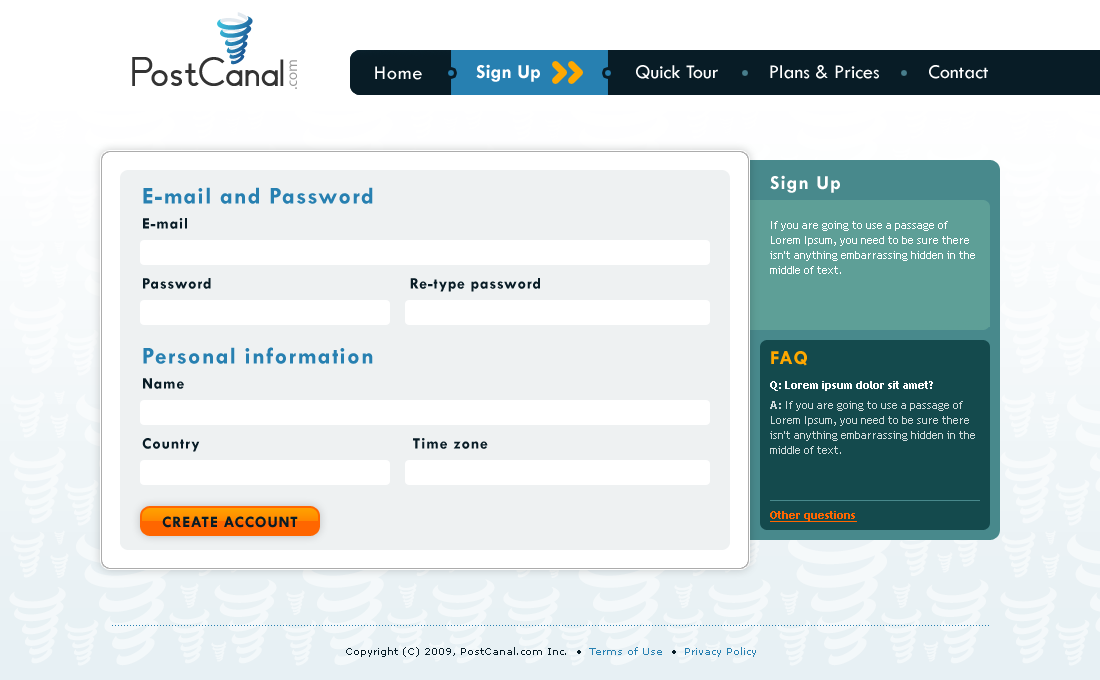
<style>
.page{position:relative;width:1100px;height:680px;background:#ffffff}
.page>*{position:absolute;margin:0}
.t1{font:20px "TwCenMT-Bold";color:#ffffff}
.t2{font:20px "TwCenMT-Regular";color:#ffffff}
.t3{font:20px "TwCenMT-Regular";letter-spacing:0.05em;color:#ffffff}
.t4{font:20px "TwCenMT-Bold";letter-spacing:0.05em;color:#ffffff}
.t5{font:24px/20px "TwCenMT-Bold";letter-spacing:0.05em;color:#2780b1}
.t6{font:16px/20px "TwCenMT-Bold";letter-spacing:0.05em;color:#081c26}
.t7{font:11px/15px "TrebuchetMS";color:#ffffff}
.t8{font:20px "TwCenMT-Bold";letter-spacing:0.05em;color:#ffa800}
.t9{font:11px "TrebuchetMS-Bold";color:#ffffff}
.t10{font:11px/15px "TrebuchetMS";color:#d0dbdb}
.t11{font:11px/15px "TrebuchetMS-Bold";color:#d0dbdb}
.t12{font:16px "TwCenMT-Bold";letter-spacing:0.05em;color:#081c26;text-transform:uppercase}
.t13{font:11px "TrebuchetMS-Bold";color:#ff6600;text-decoration:underline}
.t14{font:10px "Verdana";color:#081c26}
.t15{font:10px "Verdana";color:#2780b1}
</style>
<div class="page">
<p class="t1" style="left:476px;top:64px;width:64px;height:18px">Sign Up</p>
<p class="t2" style="left:636px;top:65px;width:82px;height:14px">Quick Tour</p>
<p class="t2" style="left:770px;top:65px;width:109px;height:14px">Plans &amp; Prices</p>
<p class="t2" style="left:929px;top:65px;width:59px;height:14px">Contact</p>
<p class="t3" style="left:375px;top:66px;width:47px;height:14px">Home</p>
<p class="t4" style="left:770px;top:175px;width:70px;height:18px">Sign Up</p>
<p class="t5" style="left:143px;top:187px;width:230px;height:177px">E-mail and Password<br><br><br><br><br><br><br><br>Personal information</p>
<p class="t6" style="left:142px;top:218px;width:398px;height:234px">E-mail<br><br><br>Password                                       Re-type password<br><br><br><br><br>Name<br><br><br>Country                                          Time zone</p>
<p class="t7" style="left:770px;top:221px;width:205px;height:53px">If you are going to use a passage of <br>Lorem Ipsum, you need to be sure there<br>isn't anything embarrassing hidden in the <br>middle of text.</p>
<p class="t8" style="left:771px;top:351px;width:36px;height:15px">FAQ</p>
<p class="t9" style="left:770px;top:381px;width:163px;height:10px">Q: Lorem ipsum dolor sit amet?</p>
<p class="t10" style="left:770px;top:401px;width:205px;height:53px"><span class="t11">A:</span> If you are going to use a passage of <br>Lorem Ipsum, you need to be sure there<br>isn't anything embarrassing hidden in the <br>middle of text.</p>
<p class="t12" style="left:162px;top:516px;width:136px;height:12px">create account</p>
<p class="t13" style="left:770px;top:511px;width:87px;height:11px">Other questions</p>
<p class="t14" style="left:346px;top:647px;width:410px;height:10px">Copyright (C) 2009, PostCanal.com Inc.  • <span class="t15"> Terms of Use</span>  •  <span class="t15">Privacy Policy</span></p>
</div>
